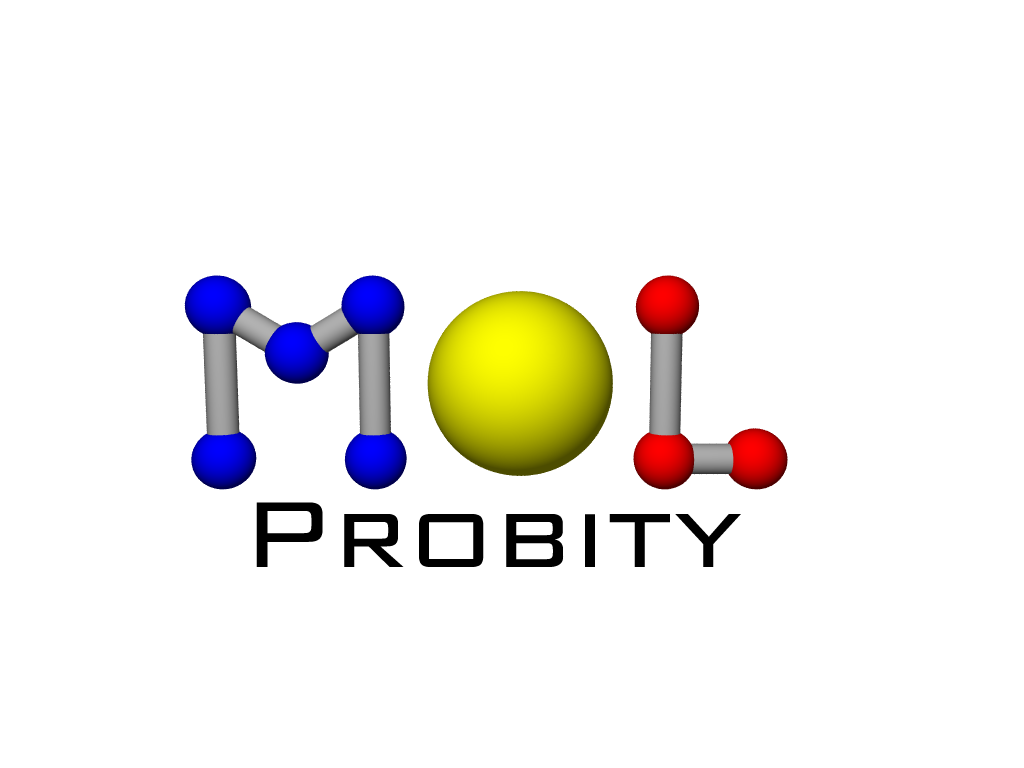
<style>
.page{position:relative;width:1024px;height:768px;background:#ffffff}
.page>*{position:absolute;margin:0}
.t1{font:125px "BankGothicBT-Light";color:#000000}
</style>
<div class="page">
<p class="t1" style="left:256px;top:502px;width:485px;height:65px">Probity</p>
</div>
